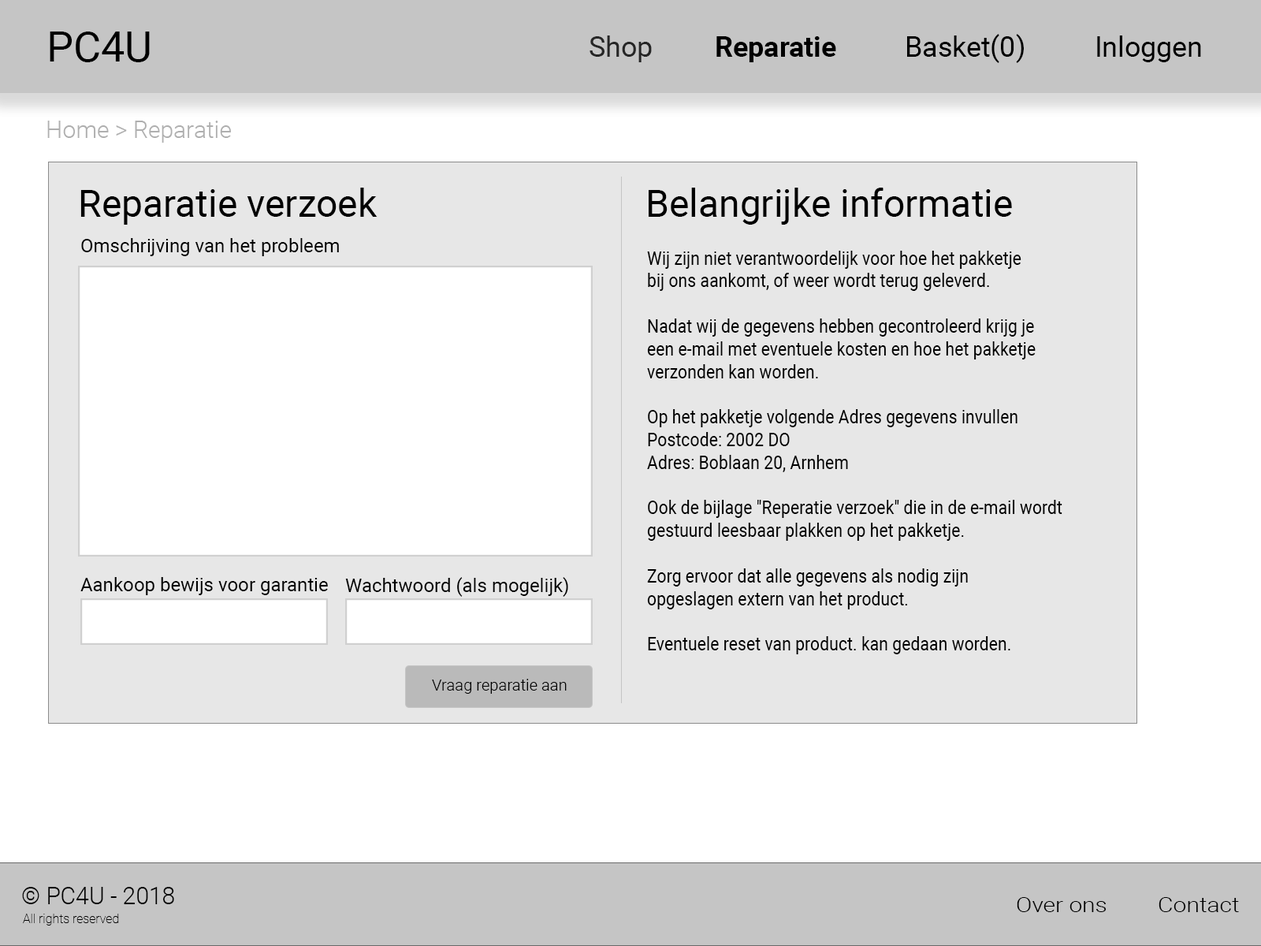
<style>
.page{position:relative;width:1261px;height:946px;background:#ffffff}
.page>*{position:absolute;margin:0}
.t1{font:42.1px "Roboto-Regular";color:#000000}
.t2{font:28px "Roboto-Regular";color:#000000}
.t3{font:28px "Roboto-Regular";color:#262626}
.t4{font:28px "Roboto-Bold";color:#000000}
.t5{font:23.7px "Roboto-Light";color:#afafaf}
.t6{font:37.8px "Roboto-Regular";color:#010101}
.t7{font:18.9px "Roboto-Regular";color:#000000}
.t8{font:18.9px "Roboto-Regular";color:#000000;scale:0.89 1}
.t9{font:16px "Roboto-Light";color:#000000}
.t10{font:23.6px "Roboto-Light";color:#000000}
.t11{font:20.4px "Roboto-Light";color:#000000;scale:1.16 1}
.t12{font:12.6px "Roboto-Thin";color:#000000}
</style>
<div class="page">
<p class="t1" style="left:50px;top:32px;width:100px;height:30px">PC4U</p>
<p class="t2" style="left:589px;top:34px;width:612px;height:29px"><span class="t3">Shop  </span><span class="t4">Reparatie</span>   Basket(0)   Inloggen</p>
<p class="t5" style="left:47px;top:121px;width:184px;height:22px">Home &gt; Reparatie</p>
<p class="t6" style="left:80px;top:188px;width:297px;height:37px">Reparatie verzoek</p>
<p class="t6" style="left:649px;top:188px;width:363px;height:37px">Belangrijke informatie</p>
<p class="t7" style="left:81px;top:238px;width:258px;height:18px">Omschrijving van het probleem</p>
<p class="t8" style="left:647px;top:251px;width:415px;height:403px">Wij zijn niet verantwoordelijk voor hoe het pakketje <br>bij ons aankomt, of weer wordt terug geleverd.<br><br>Nadat wij de gegevens hebben gecontroleerd krijg je <br>een e-mail met eventuele kosten en hoe het pakketje <br>verzonden kan worden.<br><br>Op het pakketje volgende Adres gegevens invullen<br>Postcode: 2002 DO<br>Adres: Boblaan 20, Arnhem<br><br>Ook de bijlage "Reperatie verzoek" die in de e-mail wordt <br>gestuurd leesbaar plakken op het pakketje.<br><br>Zorg ervoor dat alle gegevens als nodig zijn <br>opgeslagen extern van het product.<br><br>Eventuele reset van product. kan gedaan worden.</p>
<p class="t7" style="left:80px;top:577px;width:248px;height:18px">Aankoop bewijs voor garantie</p>
<p class="t7" style="left:345px;top:577px;width:223px;height:20px">Wachtwoord (als mogelijk)</p>
<p class="t9" style="left:432px;top:679px;width:135px;height:15px">Vraag reparatie aan</p>
<p class="t10" style="left:22px;top:887px;width:152px;height:17px">© PC4U - 2018</p>
<p class="t11" style="left:1017px;top:897px;width:222px;height:15px">Over ons  Contact</p>
<p class="t12" style="left:23px;top:913px;width:96px;height:12px">All rights reserved</p>
</div>
